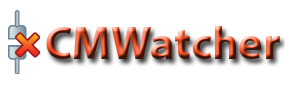
<style>
.page{position:relative;width:285px;height:85px;background:#ffffff}
.page>*{position:absolute;margin:0}
.t1{font:46px "MyriadPro-Bold"}
</style>
<div class="page">
<p class="t1" style="left:46px;top:26px;width:234px;height:33px">CMWatcher</p>
</div>
